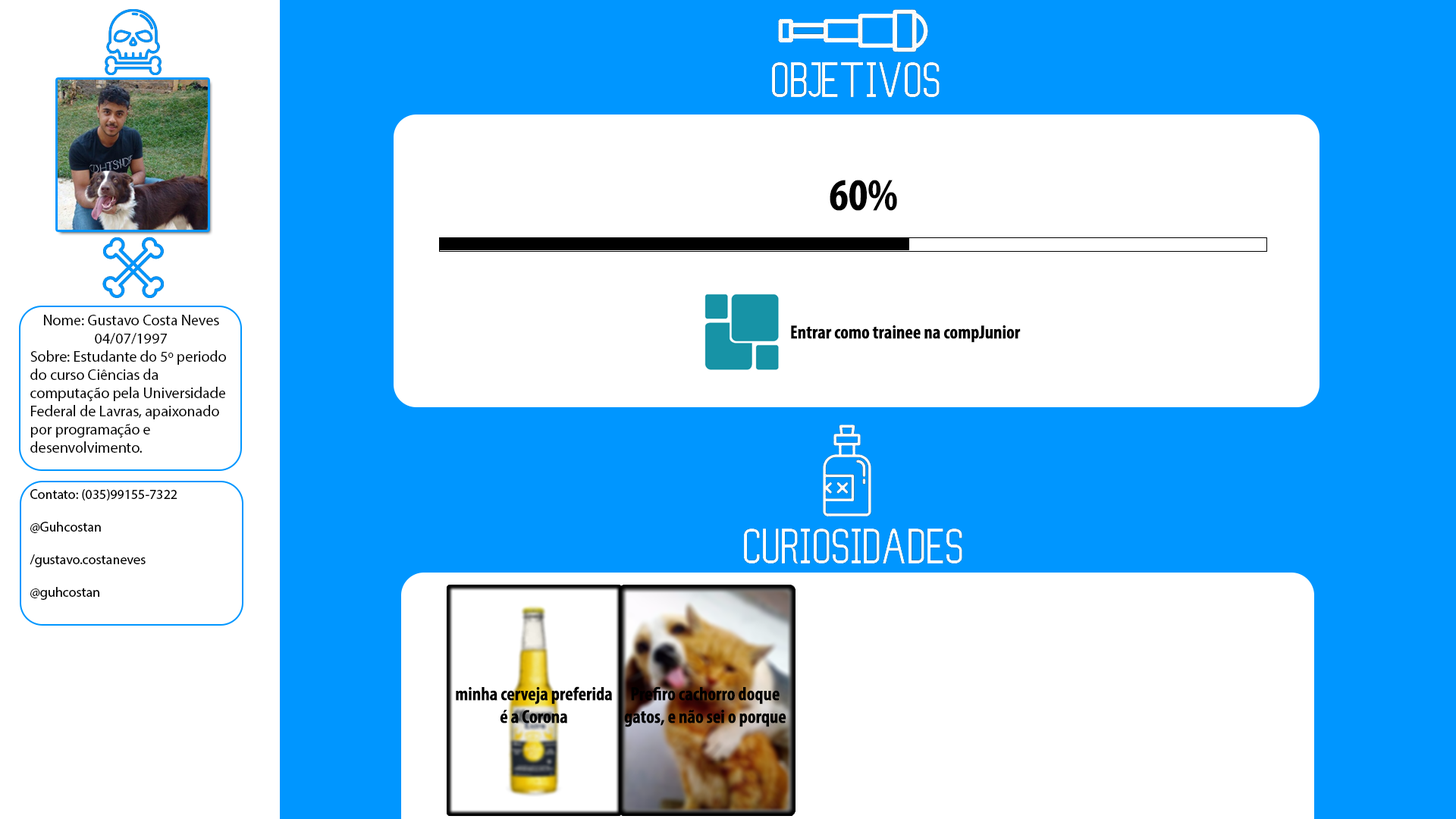
<style>
.page{position:relative;width:1456px;height:819px;background:#ffffff}
.page>*{position:absolute;margin:0}
.t1{font:45.5px "MyriadPro-BoldCond";color:#000000}
.t2{font:15.2px "MyriadPro-Regular";color:#000000}
.t3{font:19px "MyriadPro-BoldCond";color:#000000}
.t4{font:13.6px "MyriadPro-Regular";color:#000000}
</style>
<div class="page">
<p class="t1" style="left:830px;top:180px;width:67px;height:31px">60%</p>
<p class="t2" style="left:30px;top:315px;width:196px;height:138px;text-align:center">Nome: Gustavo Costa Neves<br>04/07/1997<br>Sobre: Estudante do 5º periodo do curso Ciências da computação pela Universidade Federal de Lavras, apaixonado por programação e desenvolvimento.</p>
<p class="t3" style="left:791px;top:325px;width:230px;height:18px">Entrar como trainee na compJunior</p>
<p class="t4" style="left:30px;top:489px;width:147px;height:111px">Contato: (035)99155-7322<br><br>@Guhcostan<br> <br>/gustavo.costaneves<br> <br>@guhcostan</p>
<p class="t3" style="left:456px;top:686px;width:156px;height:37px;text-align:center">minha cerveja preferida é a Corona</p>
<p class="t3" style="left:624px;top:686px;width:162px;height:41px;text-align:center">Prefiro cachorro doque gatos, e não sei o porque</p>
</div>
